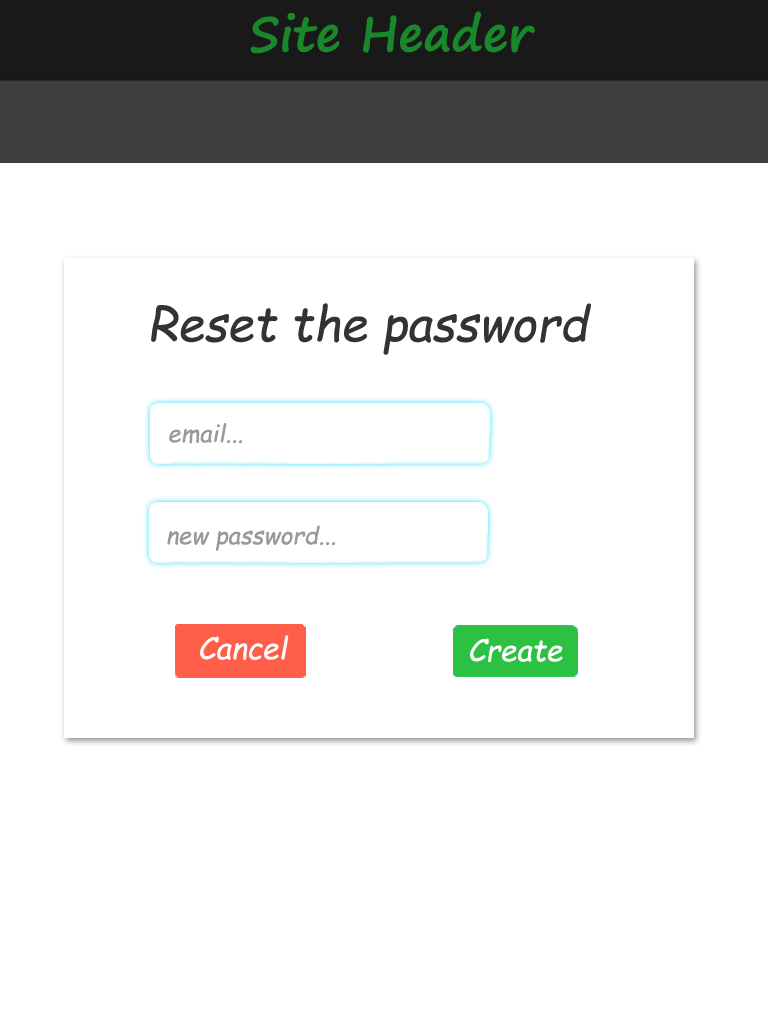
<style>
.page{position:relative;width:768px;height:1024px;background:#ffffff}
.page>*{position:absolute;margin:0}
.t1{font:48px "SegoePrint-Bold";color:#19872a}
.t2{font:48px "ComicSansMS-Italic";color:#333333}
.t3{font:24px "ComicSansMS-Italic";color:#999999}
.t4{font:30px "ComicSansMS-Italic";color:#ffffff}
</style>
<div class="page">
<p class="t1" style="left:250px;top:11px;width:285px;height:43px">Site Header</p>
<p class="t2" style="left:151px;top:303px;width:440px;height:52px">Reset the password</p>
<p class="t3" style="left:169px;top:423px;width:73px;height:21px">email...</p>
<p class="t3" style="left:167px;top:525px;width:169px;height:26px">new password...</p>
<p class="t4" style="left:200px;top:635px;width:89px;height:26px">Cancel</p>
<p class="t4" style="left:470px;top:638px;width:93px;height:24px">Create</p>
</div>
